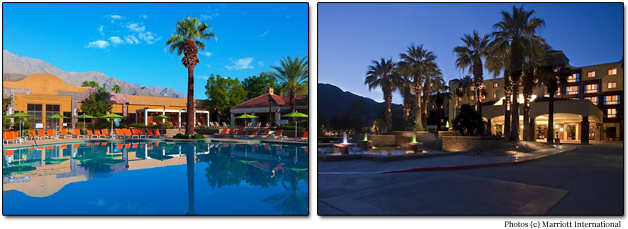
<style>
.page{position:relative;width:628px;height:229px}
.page>*{position:absolute;margin:0}
.t1{font:8px "Georgia"}
</style>
<div class="page">
<p class="t1" style="left:504px;top:221px;width:117px;height:8px">Photos (c) Marriott International</p>
</div>
